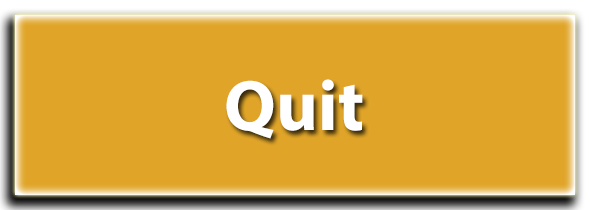
<style>
.page{position:relative;width:590px;height:210px;background:#e0a528}
.page>*{position:absolute;margin:0}
.t1{font:72px "MyriadPro-Bold";color:#ffffff}
</style>
<div class="page">
<p class="t1" style="left:226px;top:79px;width:137px;height:60px">Quit</p>
</div>
